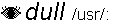
<style>
.page{position:relative;width:116px;height:25px;background:#ffffff}
.page>*{position:absolute;margin:0}
.t1{font:17.3px "ArialMT";color:#000000}
.t2{font:25.3px "ArialMT";color:#000000;font-style:italic}
</style>
<div class="page">
<p class="t1" style="left:26px;top:2px;width:82px;height:18px"><span class="t2">dull </span>/usr/:</p>
</div>
